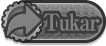
<style>
.page{position:relative;width:106px;height:46px}
.page>*{position:absolute;margin:0}
.t1{font:23px "RyuminPro-ExBold";letter-spacing:-0.08em;color:#818181;scale:0.9 1}
</style>
<div class="page">
<p class="t1" style="left:43px;top:13px;width:57px;height:18px">Tukar</p>
</div>
